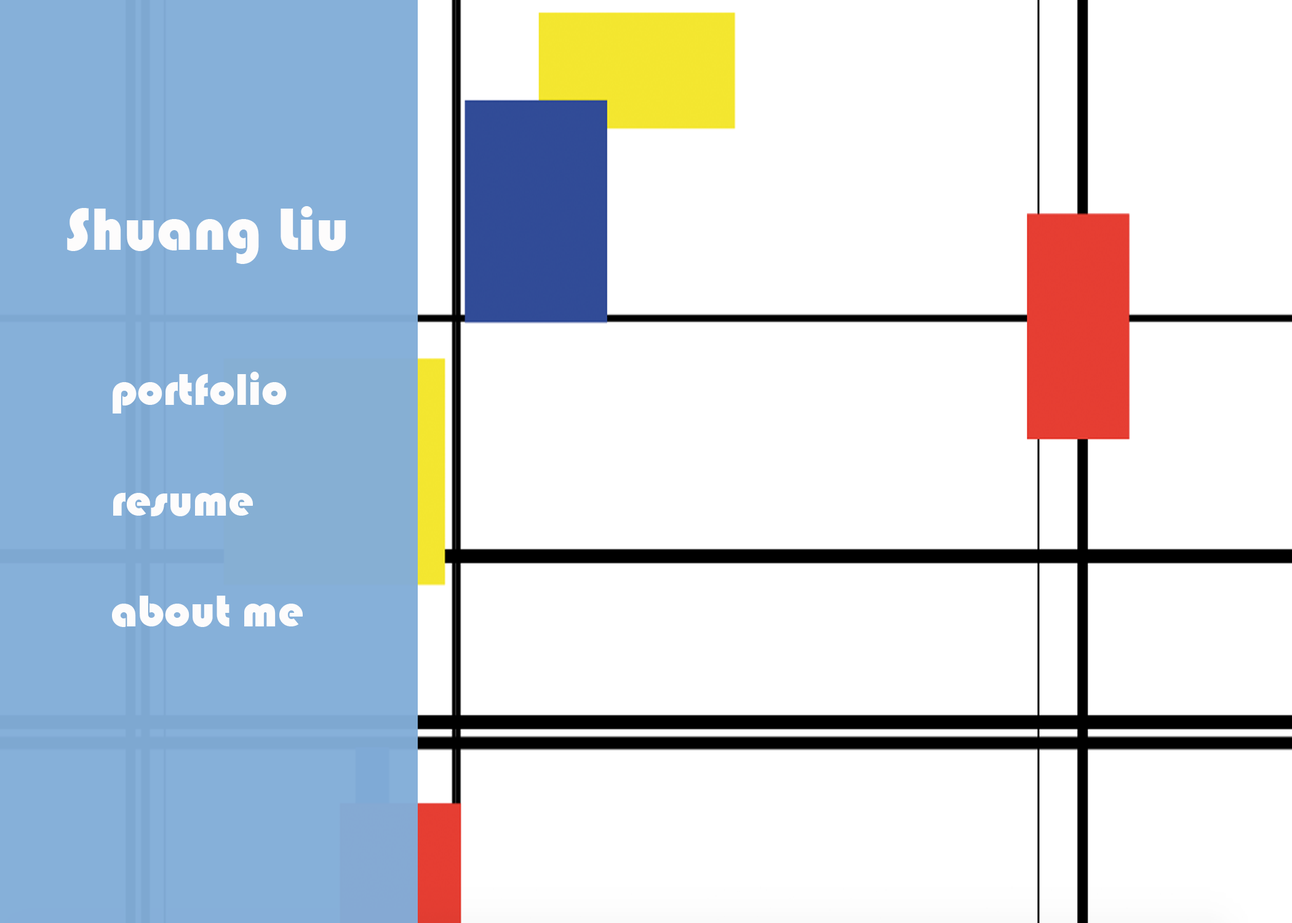
<style>
.page{position:relative;width:1292px;height:923px;background:#ffffff}
.page>*{position:absolute;margin:0}
.t1{font:61.5px "Bauhaus93";color:#fdfcfc}
.t2{font:46.1px "Bauhaus93";color:#fdfcfc}
</style>
<div class="page">
<p class="t1" style="left:67px;top:206px;width:279px;height:58px">Shuang Liu</p>
<p class="t2" style="left:112px;top:372px;width:191px;height:255px">portfolio<br><br>resume<br><br>about me</p>
</div>
